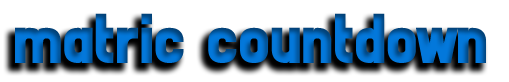
<style>
.page{position:relative;width:509px;height:82px;background:#ffffff}
.page>*{position:absolute;margin:0}
.t1{font:72px "FrontPageNews1.1"}
</style>
<div class="page">
<p class="t1" style="left:15px;top:13px;width:471px;height:50px">matric  countdown</p>
</div>
